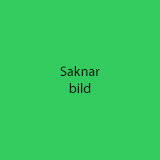
<style>
.page{position:relative;width:160px;height:160px;background:#33cd5f}
.page>*{position:absolute;margin:0}
.t1{font:14px "MyriadPro-Regular";color:#000000}
</style>
<div class="page">
<p class="t1" style="left:60px;top:66px;width:40px;height:27px;text-align:center">Saknar <br>bild</p>
</div>
